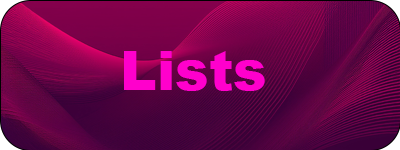
<style>
.page{position:relative;width:400px;height:150px}
.page>*{position:absolute;margin:0}
.t1{font:54.7px "Arial-Black";color:#ff00cc}
</style>
<div class="page">
<p class="t1" style="left:124px;top:51px;width:141px;height:40px">Lists</p>
</div>
